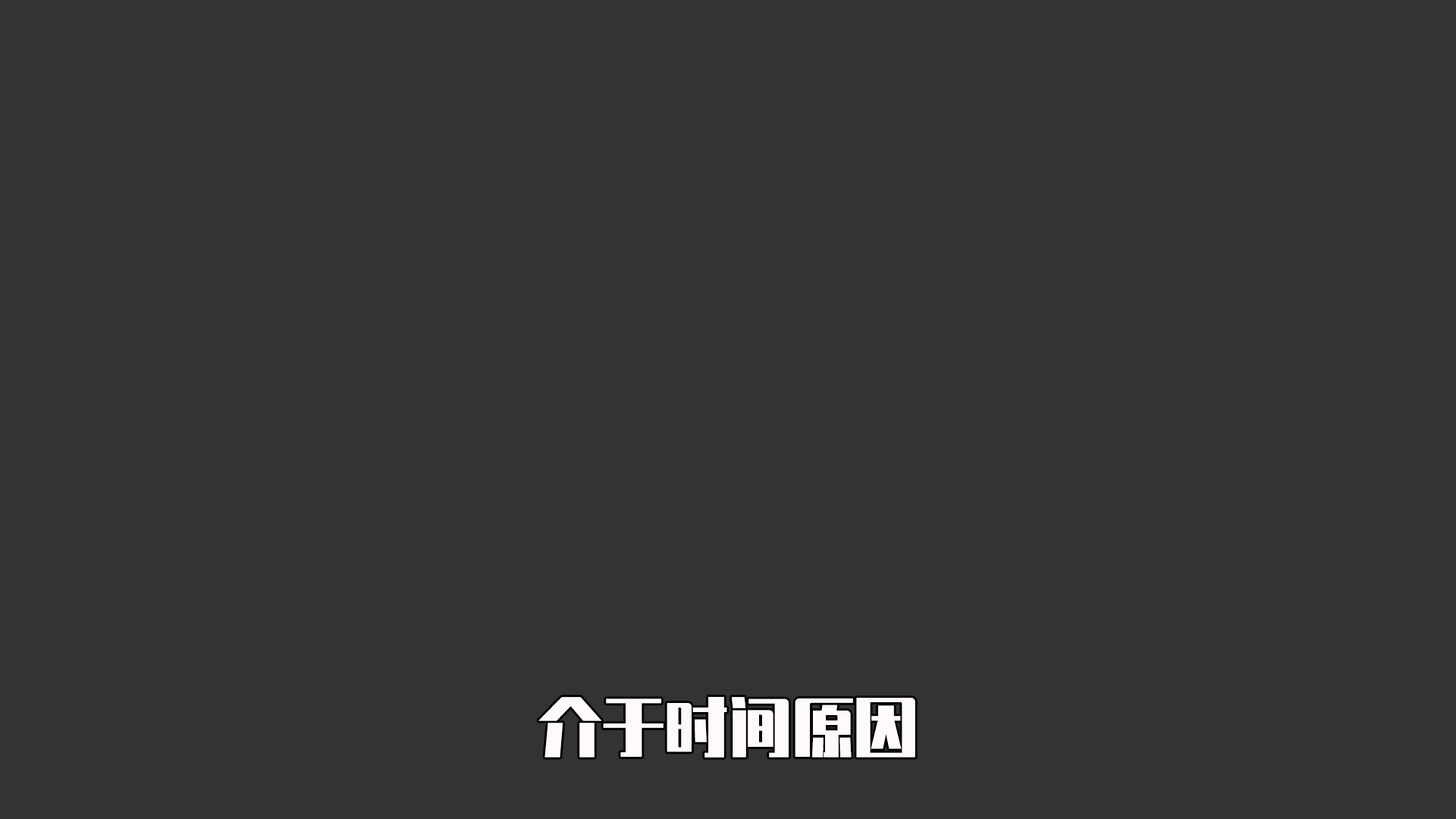
<style>
.page{position:relative;width:1456px;height:819px;background:#333333}
.page>*{position:absolute;margin:0}
.t1{font:63.2px "ZhenyanGB-Regular";color:#fefafa}
</style>
<div class="page">
<p class="t1" style="left:538px;top:697px;width:377px;height:61px">介于时间原因</p>
</div>
